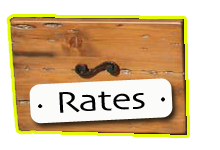
<style>
.page{position:relative;width:220px;height:150px;background:#ffffff}
.page>*{position:absolute;margin:0}
.t1{font:31.4px "Skia-Regular";letter-spacing:-0.02em;color:#020202;scale:1.22 1}
</style>
<div class="page">
<p class="t1" style="left:59px;top:91px;width:86px;height:22px;rotate:-3deg">Rates</p>
</div>
